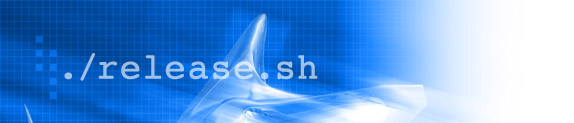
<style>
.page{position:relative;width:574px;height:123px}
.page>*{position:absolute;margin:0}
.t1{font:36px "Courier";letter-spacing:0.04em;color:#9fc2ea;font-weight:bold}
</style>
<div class="page">
<p class="t1" style="left:64px;top:53px;width:254px;height:28px">./release.sh</p>
</div>
